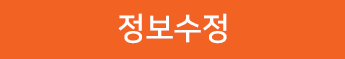
<style>
.page{position:relative;width:345px;height:59px;background:#f26222}
.page>*{position:absolute;margin:0}
.t1{font:31px "NanumSquareB";color:#ffffff}
</style>
<div class="page">
<p class="t1" style="left:118px;top:13px;width:109px;height:31px">정보수정</p>
</div>
